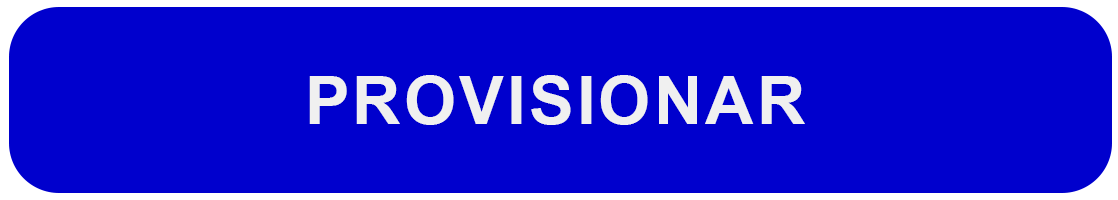
<style>
.page{position:relative;width:1118px;height:200px;background:#0000cd}
.page>*{position:absolute;margin:0}
.t1{font:66.7px "Arial-BoldMT";letter-spacing:0.05em;color:#f0f0f0}
</style>
<div class="page">
<p class="t1" style="left:309px;top:75px;width:496px;height:50px">PROVISIONAR</p>
</div>
